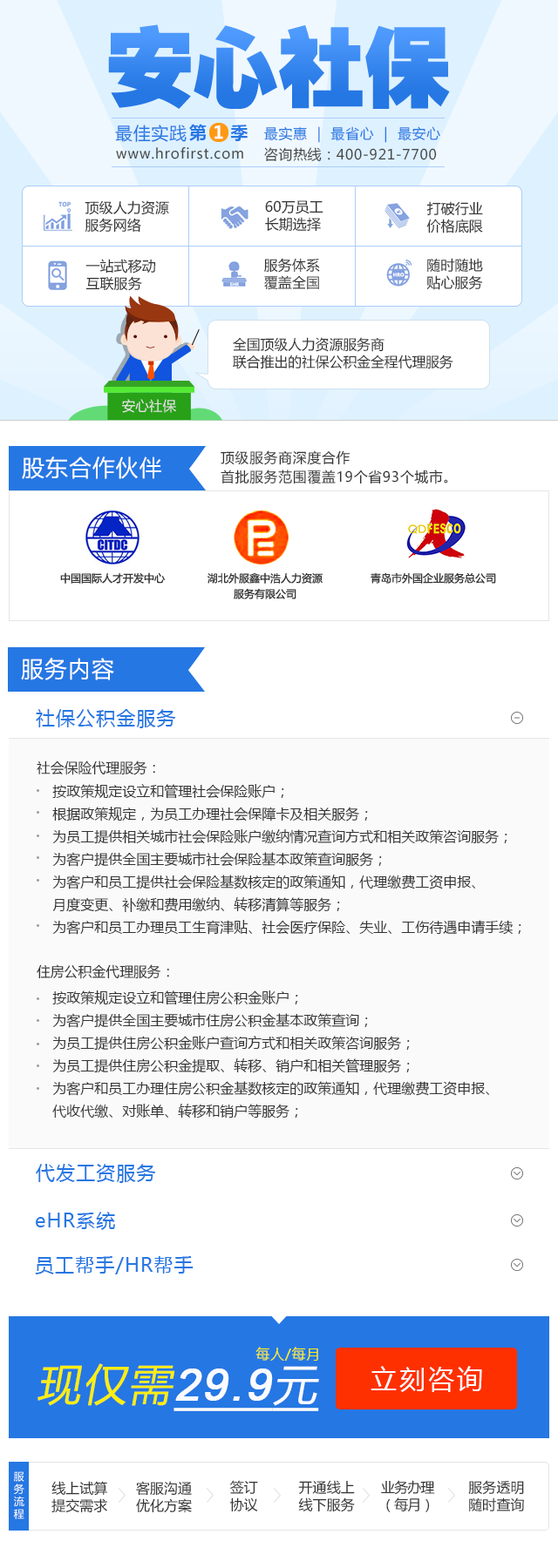
<style>
.page{position:relative;width:558px;height:1568px;background:#ffffff}
.page>*{position:absolute;margin:0}
.t1{font:87.1px "FZCCHJW--GB1-0";color:#2577e3}
.t2{font:17.4px "MicrosoftYaHei";letter-spacing:0.05em;color:#2577e3}
.t3{font:17.4px "MicrosoftYaHei-Bold";letter-spacing:0.05em;color:#2577e3}
.t4{font:17.4px "MicrosoftYaHei-Bold";letter-spacing:0.05em;color:#ffffff}
.t5{font:13.9px "MicrosoftYaHei";letter-spacing:0.05em;color:#2577e3}
.t6{font:13.9px "MicrosoftYaHei";letter-spacing:0.062em;color:#464646}
.t7{font:13.9px "MicrosoftYaHei";letter-spacing:0.05em;color:#464646}
.t8{font:13.9px/17.4px "MicrosoftYaHei";letter-spacing:0.01em;color:#333333}
.t9{font:13.9px/17.4px "MicrosoftYaHei";color:#333333}
.t10{font:13.7px "MicrosoftYaHei";letter-spacing:0.01em;color:#e8e4e4;text-transform:uppercase}
.t11{font:22.6px "MicrosoftYaHei";letter-spacing:0.05em;color:#ffffff}
.t12{font:13.9px/19.2px "MicrosoftYaHei";letter-spacing:0.05em;color:#333333}
.t13{font:19.2px "MicrosoftYaHei";letter-spacing:0.05em;color:#2577e3}
.t14{font:13.9px "MicrosoftYaHei";color:#333333}
.t15{font:13.9px/22.6px "MicrosoftYaHei";color:#333333}
.t16{font:13.9px "MicrosoftYaHei";letter-spacing:0.05em;color:#fff100}
.t17{font:43.6px "ArialMT";letter-spacing:0.05em;color:#ffffff;font-weight:bold;font-style:italic;text-decoration:underline}
.t18{font:43.6px "MicrosoftYaHei";letter-spacing:0.05em;color:#fff100;font-style:italic}
.t19{font:43.6px "MicrosoftYaHei";letter-spacing:0.05em;color:#ffffff;font-style:italic;text-decoration:underline}
.t20{font:26.1px "MicrosoftYaHei";letter-spacing:0.1em;color:#ffffff}
.t21{font:10.5px/12.5px "MicrosoftYaHei";letter-spacing:0.005em;color:#ffffff;text-transform:uppercase}
.t22{font:13.9px/17.4px "MicrosoftYaHei";letter-spacing:0.005em;color:#333333;text-transform:uppercase}
.t23{font:13.9px/17.4px "MicrosoftYaHei";letter-spacing:-0.05em;color:#333333;text-transform:uppercase}
</style>
<div class="page">
<p class="t1" style="left:108px;top:24px;width:341px;height:85px">安心社保</p>
<p class="t2" style="left:115px;top:125px;width:71px;height:17px">最佳实践</p>
<p class="t3" style="left:189px;top:124px;width:58px;height:17px">第<span class="t4"> 1 </span>季</p>
<p class="t5" style="left:264px;top:126px;width:176px;height:17px">最实惠  |  最省心  |  最安心</p>
<p class="t6" style="left:116px;top:146px;width:127px;height:13px">www.hrofirst.com</p>
<p class="t7" style="left:264px;top:147px;width:172px;height:14px">咨询热线：400-921-7700</p>
<p class="t8" style="left:84px;top:200px;width:85px;height:33px">顶级人力资源<br>服务网络</p>
<p class="t8" style="left:265px;top:200px;width:58px;height:32px">60万员工<br>长期选择</p>
<p class="t8" style="left:426px;top:201px;width:57px;height:32px;text-align:center">打破行业<br>价格底限</p>
<p class="t8" style="left:264px;top:258px;width:56px;height:32px;text-align:center">服务体系<br>覆盖全国</p>
<p class="t8" style="left:426px;top:258px;width:57px;height:32px">随时随地<br>贴心服务</p>
<p class="t8" style="left:85px;top:259px;width:71px;height:32px">一站式移动<br>互联服务</p>
<p class="t9" style="left:233px;top:337px;width:220px;height:32px">全国顶级人力资源服务商<br>联合推出的社保公积金全程代理服务</p>
<p class="t10" style="left:122px;top:399px;width:54px;height:14px">安心社保</p>
<p class="t11" style="left:22px;top:456px;width:139px;height:23px">股东合作伙伴</p>
<p class="t12" style="left:220px;top:450px;width:228px;height:34px">顶级服务商深度合作<br>首批服务范围覆盖19个省93个城市。</p>
<p class="t11" style="left:21px;top:658px;width:93px;height:22px">服务内容</p>
<p class="t13" style="left:36px;top:709px;width:140px;height:19px">社保公积金服务</p>
<p class="t14" style="left:37px;top:760px;width:118px;height:15px">社会保险代理服务：</p>
<p class="t15" style="left:52px;top:784px;width:469px;height:151px">按政策规定设立和管理社会保险账户；<br>根据政策规定，为员工办理社会保障卡及相关服务；<br>为员工提供相关城市社会保险账户缴纳情况查询方式和相关政策咨询服务；<br>为客户提供全国主要城市社会保险基本政策查询服务；<br>为客户和员工提供社会保险基数核定的政策通知，代理缴费工资申报、<br>月度变更、补缴和费用缴纳、转移清算等服务；<br>为客户和员工办理员工生育津贴、社会医疗保险、失业、工伤待遇申请手续；</p>
<p class="t14" style="left:37px;top:964px;width:132px;height:15px">住房公积金代理服务：</p>
<p class="t15" style="left:52px;top:990px;width:438px;height:129px">按政策规定设立和管理住房公积金账户；<br>为客户提供全国主要城市住房公积金基本政策查询；<br>为员工提供住房公积金账户查询方式和相关政策咨询服务；<br>为员工提供住房公积金提取、转移、销户和相关管理服务；<br>为客户和员工办理住房公积金基数核定的政策通知，代理缴费工资申报、<br>代收代缴、对账单、转移和销户等服务；</p>
<p class="t13" style="left:36px;top:1164px;width:120px;height:19px">代发工资服务</p>
<p class="t13" style="left:36px;top:1212px;width:79px;height:18px">eHR系统</p>
<p class="t13" style="left:35px;top:1256px;width:158px;height:18px">员工帮手/HR帮手</p>
<p class="t16" style="left:255px;top:1347px;width:63px;height:14px;opacity:0.97">每人/每月</p>
<p class="t17" style="left:37px;top:1363px;width:282px;height:48px;opacity:0.97"><span class="t18">现仅需</span>29.9<span class="t19">元</span></p>
<p class="t20" style="left:370px;top:1366px;width:112px;height:26px">立刻咨询</p>
<p class="t21" style="left:13px;top:1471px;width:11px;height:48px">服<br>务<br>流<br>程</p>
<p class="t22" style="left:51px;top:1481px;width:56px;height:32px">线上试算<br>提交需求</p>
<p class="t22" style="left:136px;top:1481px;width:56px;height:32px;text-align:center">客服沟通<br>优化方案</p>
<p class="t22" style="left:230px;top:1480px;width:28px;height:32px">签订<br>协议</p>
<p class="t22" style="left:298px;top:1480px;width:57px;height:32px">开通线上<br>线下服务</p>
<p class="t23" style="left:381px;top:1480px;width:54px;height:32px">业务办理<br>（每月）</p>
<p class="t22" style="left:468px;top:1480px;width:56px;height:31px;text-align:center">服务透明<br>随时查询</p>
</div>
